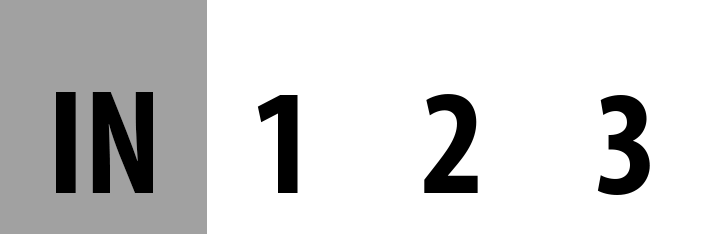
<style>
.page{position:relative;width:709px;height:236px;background:#ffffff}
.page>*{position:absolute;margin:0}
.t1{font:150px "MyriadPro-BoldCond";color:#000000}
</style>
<div class="page">
<p class="t1" style="left:56px;top:92px;width:97px;height:101px">IN</p>
<p class="t1" style="left:257px;top:95px;width:41px;height:98px">1</p>
<p class="t1" style="left:424px;top:94px;width:54px;height:99px">2</p>
<p class="t1" style="left:597px;top:95px;width:53px;height:100px">3</p>
</div>
